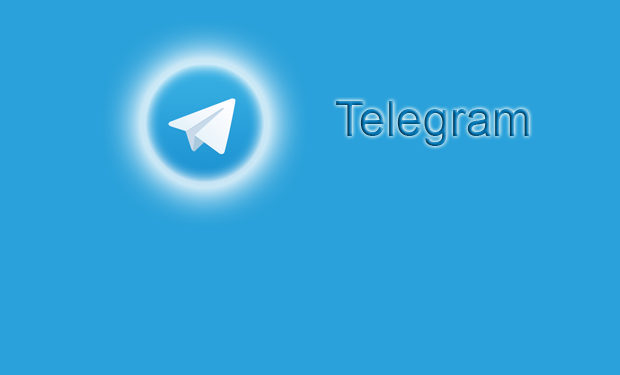
<style>
.page{position:relative;width:620px;height:375px;background:#2aa1da}
.page>*{position:absolute;margin:0}
.t1{font:48px "ArialMT"}
</style>
<div class="page">
<p class="t1" style="left:336px;top:101px;width:193px;height:45px">Telegram</p>
</div>
